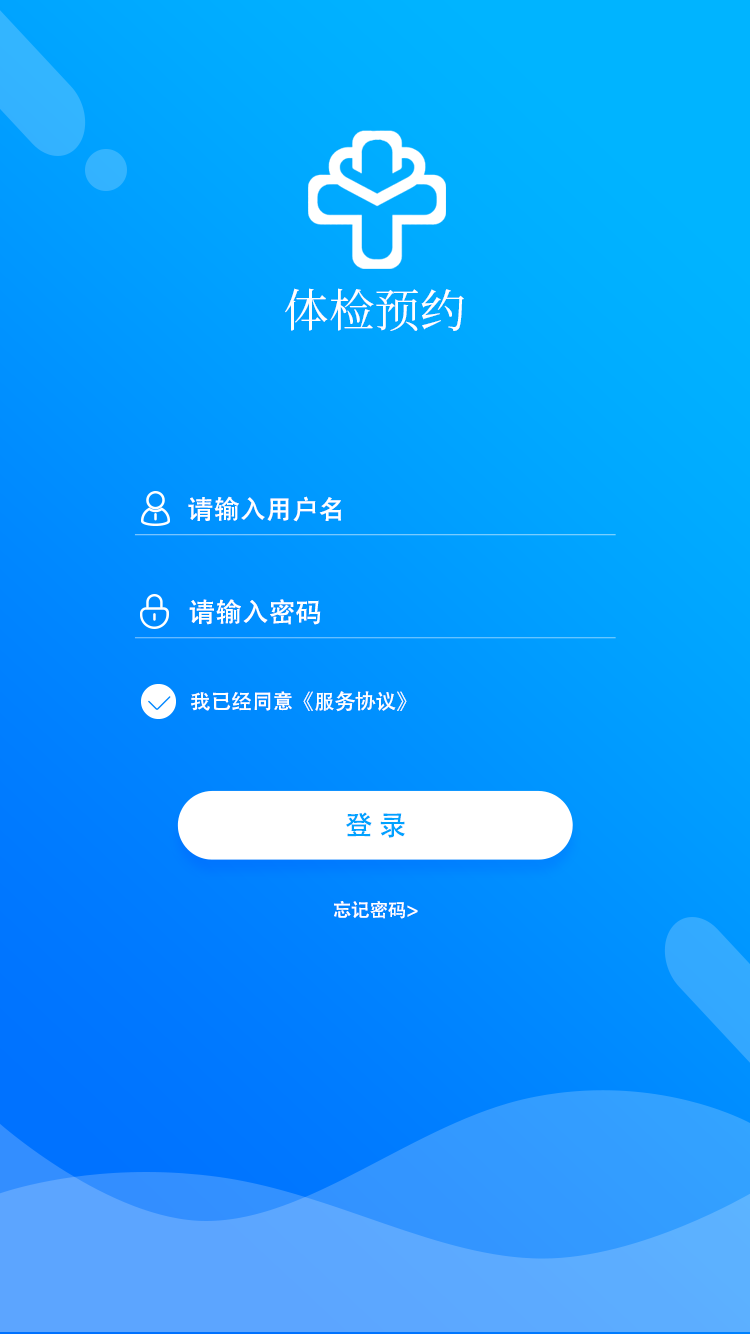
<style>
.page{position:relative;width:750px;height:1334px}
.page>*{position:absolute;margin:0}
.t1{font:45.7px "SourceHanSerifCN-Regular";color:#fffefe}
.t2{font:26.1px "AdobeHeitiStd-Regular";color:#ffffff}
.t3{font:26.6px "AdobeHeitiStd-Regular";color:#ffffff}
.t4{font:20.6px "AdobeHeitiStd-Regular";color:#ffffff}
.t5{font:27.5px "AdobeHeitiStd-Regular";color:#00a2ff}
.t6{font:18.3px "AdobeHeitiStd-Regular";color:#ffffff}
</style>
<div class="page">
<p class="t1" style="left:285px;top:288px;width:179px;height:43px">体检预约</p>
<p class="t2" style="left:188px;top:496px;width:153px;height:26px">请输入用户名</p>
<p class="t3" style="left:189px;top:599px;width:132px;height:26px">请输入密码</p>
<p class="t4" style="left:191px;top:691px;width:216px;height:21px">我已经同意《服务协议》</p>
<p class="t5" style="left:346px;top:812px;width:59px;height:26px">登 录</p>
<p class="t6" style="left:334px;top:901px;width:84px;height:18px">忘记密码&gt;</p>
</div>
